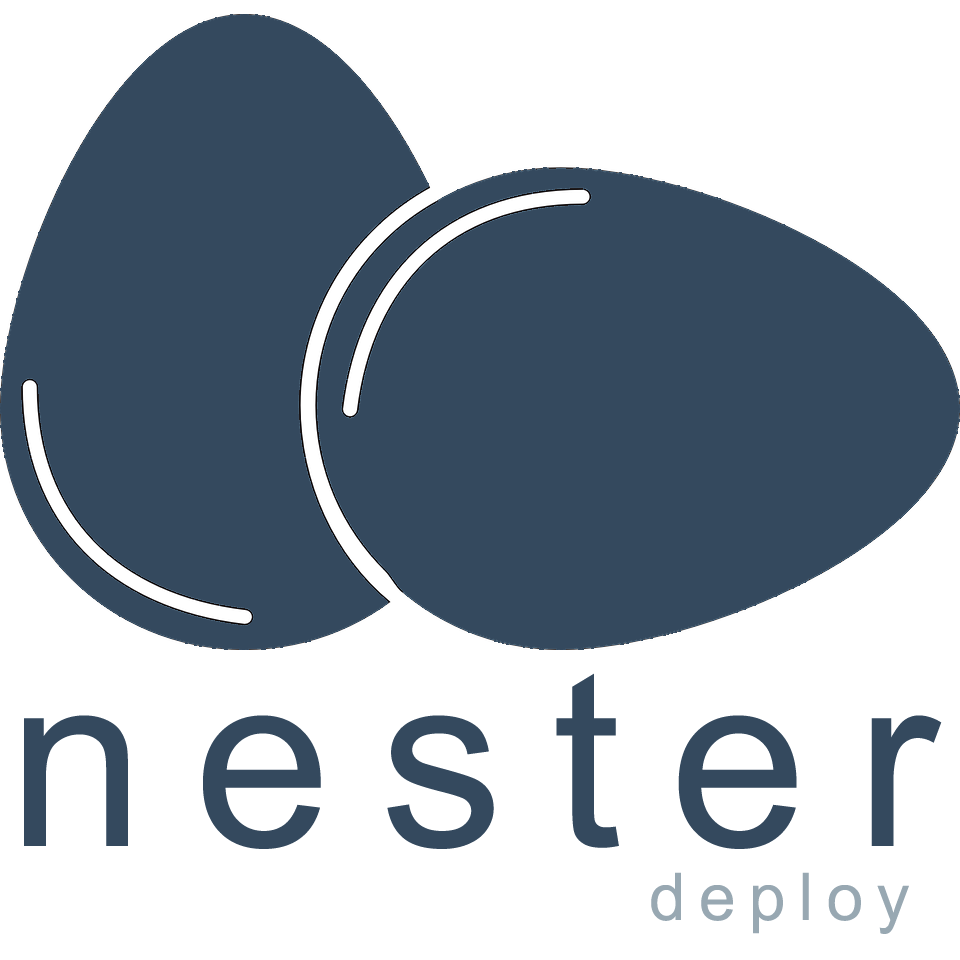
<style>
.page{position:relative;width:960px;height:960px;background:#ffffff}
.page>*{position:absolute;margin:0}
.t1{font:246px "ArialMT";letter-spacing:0.2em;color:#34495e}
.t2{font:66px "ArialMT";letter-spacing:0.2em;color:#98a8b2}
</style>
<div class="page">
<p class="t1" style="left:24px;top:673px;width:918px;height:176px">nester</p>
<p class="t2" style="left:651px;top:872px;width:258px;height:62px">deploy</p>
</div>
